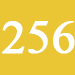
<style>
.page{position:relative;width:75px;height:75px;background:#eac635}
.page>*{position:absolute;margin:0}
.t1{font:48px "TimesNewRomanPSMT";color:#ffffff;font-weight:bold}
</style>
<div class="page">
<p class="t1" style="left:2px;top:21px;width:73px;height:33px">256</p>
</div>
